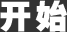
<style>
.page{position:relative;width:67px;height:32px;background:#ffffff}
.page>*{position:absolute;margin:0}
.t1{font:33px "HeitiEG-Ultra-GB";letter-spacing:0.1em;color:#ffffff}
</style>
<div class="page">
<p class="t1" style="left:0px;top:0px;width:67px;height:32px">开始</p>
</div>
